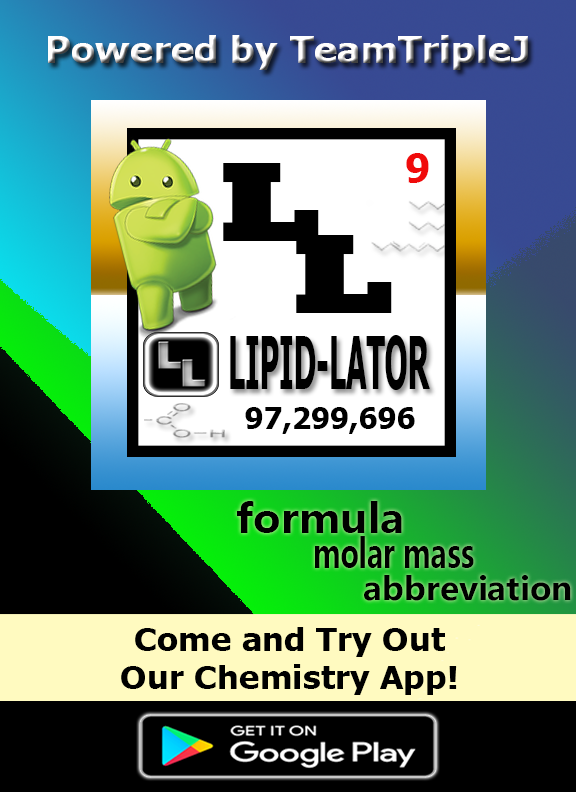
<style>
.page{position:relative;width:576px;height:792px;background:#000000}
.page>*{position:absolute;margin:0}
.t1{font:36.6px "Tahoma-Bold";scale:1.07 1}
.t2{font:40px "Tahoma-Bold";color:#f00b0b}
.t3{font:115.4px "Rockwell-ExtraBold";color:#000000;scale:1.27 1}
.t4{font:73.3px "Tahoma-Bold";color:#000000;scale:0.41 1}
.t5{font:30px "Tahoma-Bold";color:#000000}
.t6{font:40px "MicrosoftYaHei-Bold";color:#000000;scale:1.05 1}
.t7{font:40px "MicrosoftYaHei-Bold";color:#000000;scale:0.7 1}
.t8{font:31.2px "MicrosoftYaHei-Bold";color:#000000;scale:1.05 1}
.t9{font:32.2px "Tahoma-Bold";color:#000000;scale:1.07 1}
</style>
<div class="page">
<p class="t1" style="left:48px;top:35px;width:480px;height:35px">Powered by TeamTripleJ</p>
<p class="t2" style="left:406px;top:153px;width:23px;height:30px">9</p>
<p class="t3" style="left:223px;top:163px;width:96px;height:78px">L</p>
<p class="t3" style="left:296px;top:235px;width:96px;height:78px">L</p>
<p class="t4" style="left:230px;top:335px;width:200px;height:55px">LIPID-LATOR</p>
<p class="t5" style="left:245px;top:407px;width:170px;height:27px">97,299,696</p>
<p class="t6" style="left:237px;top:501px;width:165px;height:32px">formula</p>
<p class="t7" style="left:315px;top:536px;width:159px;height:32px">molar mass</p>
<p class="t8" style="left:364px;top:575px;width:207px;height:26px">abbreviation</p>
<p class="t9" style="left:121px;top:627px;width:336px;height:68px;text-align:center">Come and Try Out<br>Our Chemistry App!</p>
</div>
